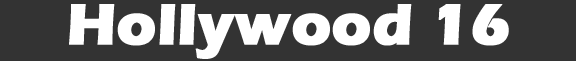
<style>
.page{position:relative;width:576px;height:61px;background:#333333}
.page>*{position:absolute;margin:0}
.t1{font:60px "ErasITC-Bold";color:#ffffff;font-weight:bold}
</style>
<div class="page">
<p class="t1" style="left:69px;top:4px;width:440px;height:55px">Hollywood 16</p>
</div>
